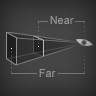
<style>
.page{position:relative;width:96px;height:96px}
.page>*{position:absolute;margin:0}
.t1{font:11px "ArialMT";color:#969696}
.t2{font:11px "ArialMT";color:#989898}
</style>
<div class="page">
<p class="t1" style="left:50px;top:16px;width:24px;height:8px">Near</p>
<p class="t2" style="left:39px;top:69px;width:17px;height:8px">Far</p>
</div>
